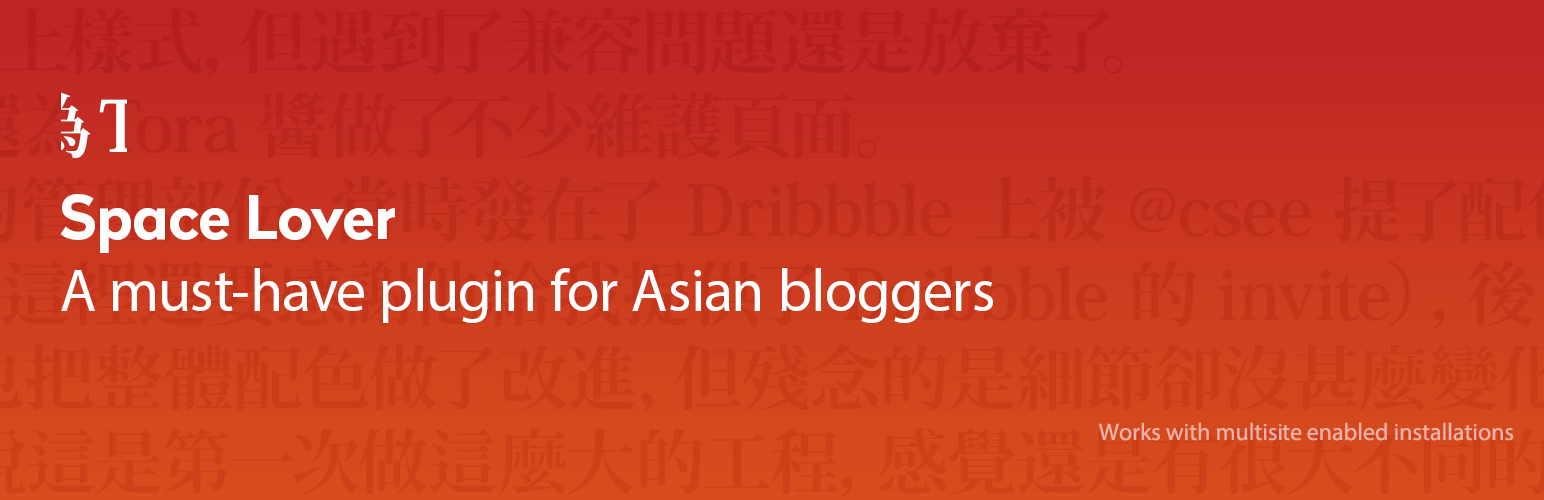
<style>
.page{position:relative;width:1544px;height:500px}
.page>*{position:absolute;margin:0}
.t1{font:70px "KozMinPr6N-Bold";color:#ffffff}
.t2{font:60px "MyriadPro-Regular";color:#ffffff}
.t3{font:60px "Radikal-Bold";color:#ffffff}
.t4{font:24px "MyriadPro-Regular";color:#eab3a8}
</style>
<div class="page">
<p class="t1" style="left:24px;top:92px;width:118px;height:67px">為 T</p>
<p class="t2" style="left:60px;top:194px;width:933px;height:129px"><span class="t3">Space Lover<br></span>A must-have plugin for Asian bloggers</p>
<p class="t4" style="left:1099px;top:422px;width:415px;height:19px">Works with multisite enabled installations</p>
</div>
